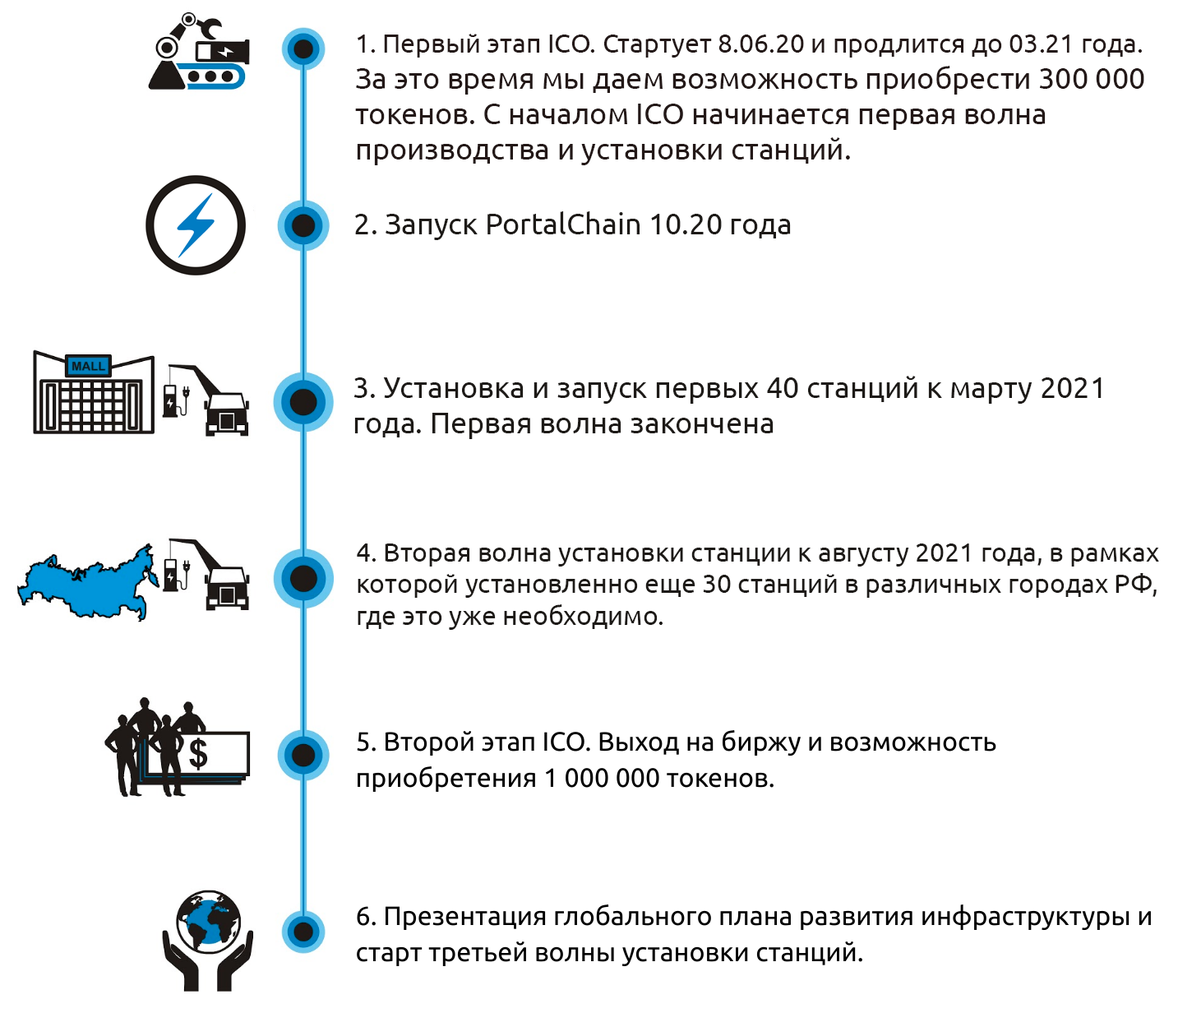
<style>
.page{position:relative;width:1178px;height:1013px;background:#ffffff}
.page>*{position:absolute;margin:0}
.t1{font:29.6px "Ubuntu";color:#231817}
.t2{font:26.3px "Ubuntu";color:#231817}
.t3{font:29.6px "Ubuntu";color:#1d1a17}
.t4{font:26.3px "Ubuntu";color:#1d1a17}
</style>
<div class="page">
<p class="t1" style="left:355px;top:34px;width:789px;height:131px"><span class="t2">1. Первый этап ICO. Стартует 8.06.20 и продлится до 03.21 года.<br></span>За это время мы даем возможность приобрести 300 000<br>токенов. С началом ICO начинается первая волна<br>производства и установки станций.</p>
<p class="t3" style="left:355px;top:211px;width:436px;height:29px">2. Запуск PortalChain 10.20 года</p>
<p class="t3" style="left:354px;top:376px;width:747px;height:63px">3. Установка и запуск первых 40 станций к марту 2021 <br>года. Первая волна закончена</p>
<p class="t4" style="left:357px;top:543px;width:802px;height:87px">4. Вторая волна установки станции к августу 2021 года, в рамках<br>которой установленно еще 30 станций в различных городах РФ,<br>где это уже необходимо.</p>
</div>
